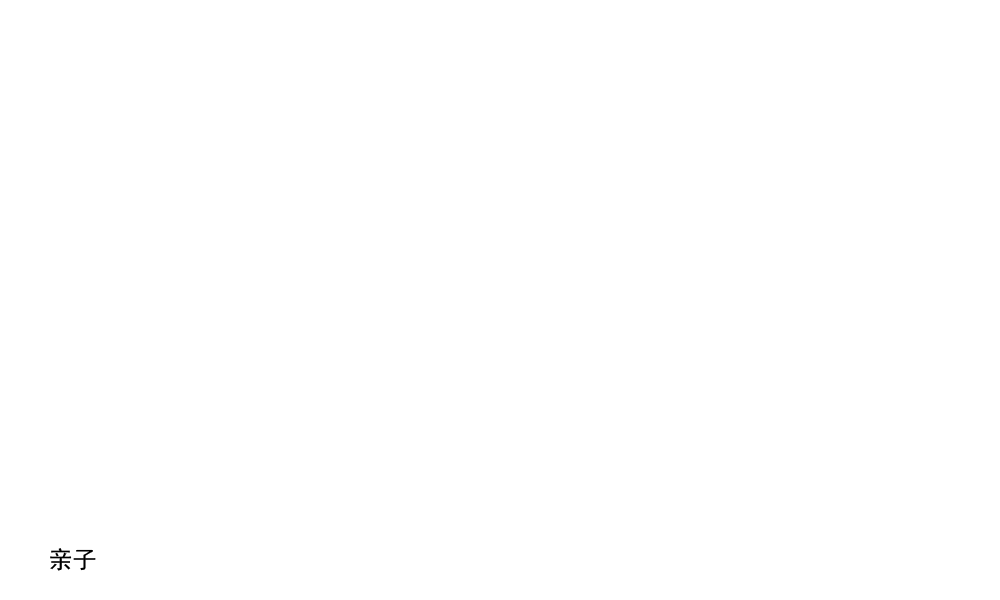
<style>
.page{position:relative;width:1000px;height:600px;background:#ffffff}
.page>*{position:absolute;margin:0}
.t1{font:24px "SimHei";color:#000000}
</style>
<div class="page">
<p class="t1" style="left:50px;top:548px;width:46px;height:23px">亲子</p>
</div>
